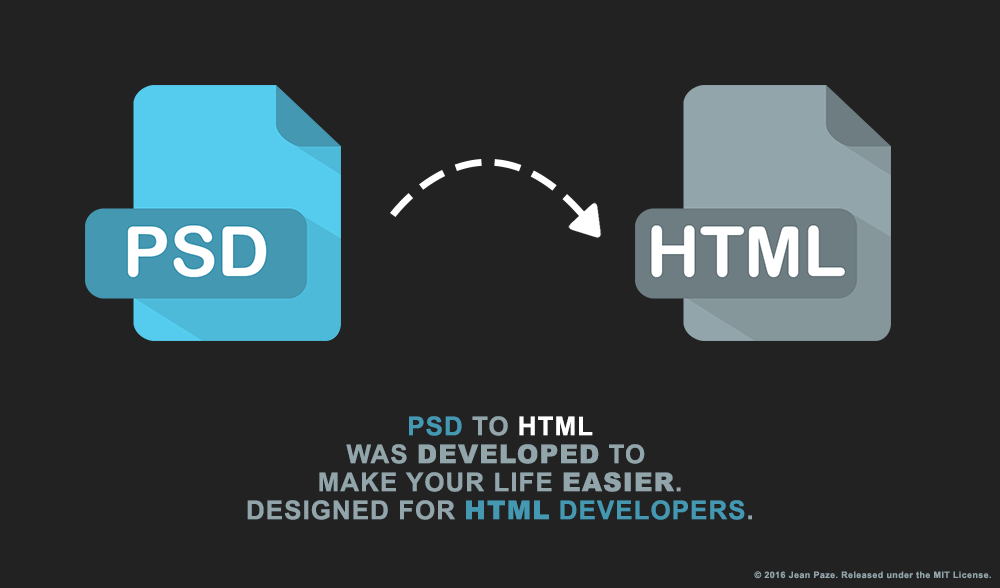
<style>
.page{position:relative;width:1000px;height:588px;background:#222222}
.page>*{position:absolute;margin:0}
.t1{font:25.9px/28px "Arial-BoldMT";letter-spacing:0.04em;color:#92a5ab;text-transform:uppercase}
.t2{font:25.9px/28px "Arial-BoldMT";letter-spacing:0.04em;color:#4498b2;text-transform:uppercase}
.t3{font:25.9px/28px "Arial-BoldMT";letter-spacing:0.04em;color:#ffffff;text-transform:uppercase}
.t4{font:25.9px/28px "Arial-Black";letter-spacing:0.04em;color:#92a5ab;text-transform:uppercase}
.t5{font:25.9px/28px "Arial-Black";letter-spacing:0.04em;color:#4498b2;text-transform:uppercase}
</style>
<div class="page">
<p class="t1" style="left:247px;top:416px;width:505px;height:104px;text-align:center"><span class="t2">PSD </span>TO<span class="t3"> HTML<br></span>WAS <span class="t4">DEVELOPED</span> TO <br>MAKE YOUR LIFE <span class="t4">EASIER</span>.<br>DesigneD for <span class="t5">HTML</span><span class="t2"> DEVELOPERS</span>.</p>
</div>
